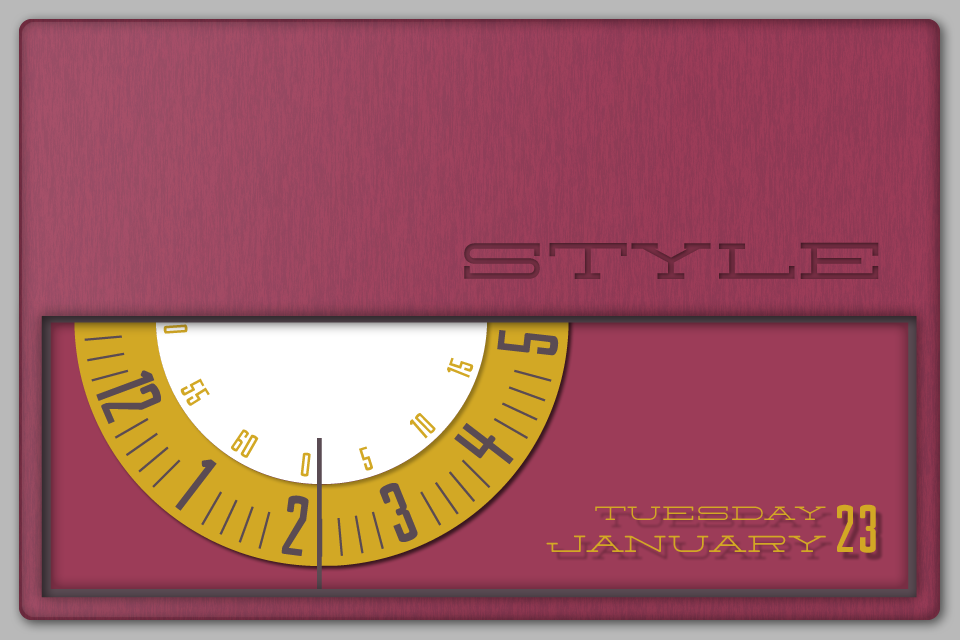
<style>
.page{position:relative;width:960px;height:640px}
.page>*{position:absolute;margin:0}
.t1{font:54.3px "OfferingBold";letter-spacing:0.02em;color:#792f45}
.t2{font:24.6px "OfferingRoundedReg";letter-spacing:0.02em;color:#d2a825}
.t3{font:63.4px "Ministry";letter-spacing:0.02em;color:#d2a825}
.t4{font:20.4px "OfferingRoundedReg";letter-spacing:0.02em;color:#d2a825}
</style>
<div class="page">
<p class="t1" style="left:464px;top:242px;width:415px;height:37px">style</p>
<p class="t2" style="left:546px;top:504px;width:330px;height:49px">January <span class="t3">23</span></p>
<p class="t4" style="left:595px;top:506px;width:231px;height:14px">Tuesday</p>
</div>
